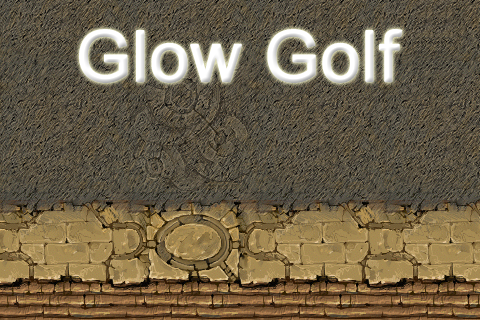
<style>
.page{position:relative;width:480px;height:320px}
.page>*{position:absolute;margin:0}
.t1{font:70px "ArialMT";color:#ffffff;font-weight:bold}
</style>
<div class="page">
<p class="t1" style="left:79px;top:29px;width:324px;height:54px">Glow Golf</p>
</div>
